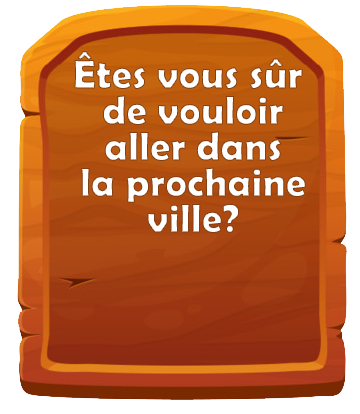
<style>
.page{position:relative;width:360px;height:414px}
.page>*{position:absolute;margin:0}
.t1{font:40.9px/36px "BerlinSansFBDemi-Bold";color:#ffffff}
</style>
<div class="page">
<p class="t1" style="left:74px;top:51px;width:232px;height:182px;text-align:center">Êtes vous sûr <br>de vouloir<br>aller dans<br>la prochaine<br>ville?</p>
</div>
